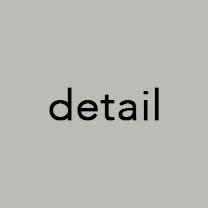
<style>
.page{position:relative;width:208px;height:208px;background:#babdb6}
.page>*{position:absolute;margin:0}
.t1{font:43.3px "Avenir-Light";color:#000000;font-weight:bold}
</style>
<div class="page">
<p class="t1" style="left:49px;top:87px;width:110px;height:34px">detail</p>
</div>
